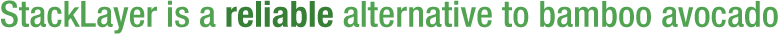
<style>
.page{position:relative;width:780px;height:34px;background:#ffffff}
.page>*{position:absolute;margin:0}
.t1{font:36.2px "HelveticaNeueLTPro-MdCn";color:#51a351}
.t2{font:36.2px "HelveticaNeueLTPro-BdCn";color:#377f37}
</style>
<div class="page">
<p class="t1" style="left:1px;top:0px;width:777px;height:34px">StackLayer is a <span class="t2">reliable</span> alternative to bamboo avocado</p>
</div>
